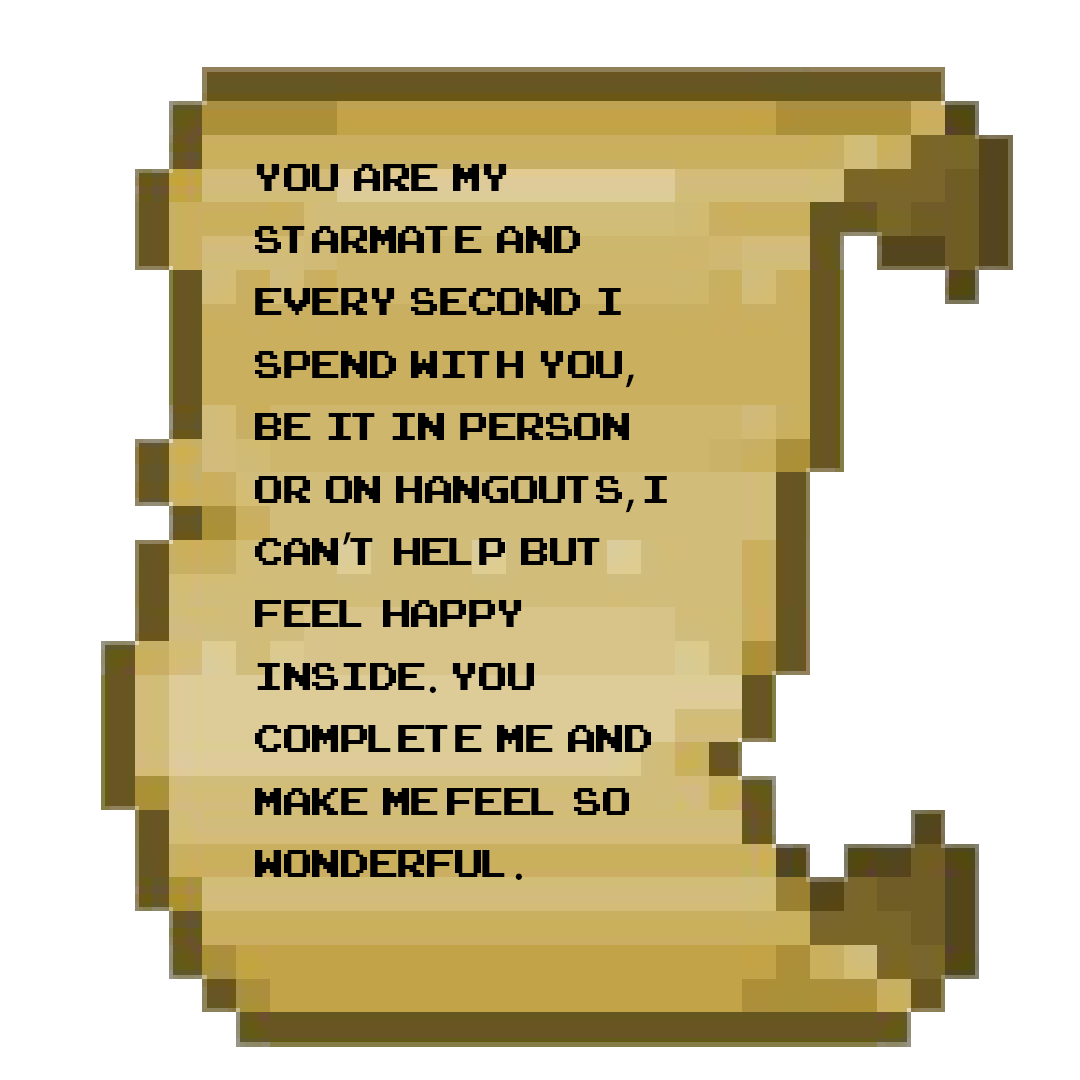
<style>
.page{position:relative;width:1080px;height:1080px;background:#ffffff}
.page>*{position:absolute;margin:0}
.t1{font:52px "ArcadeClassic";color:#000000}
.t2{font:52px "MyriadPro-Regular";color:#000000}
</style>
<div class="page">
<p class="t1" style="left:255px;top:164px;width:412px;height:716px">you  are  my  starmate  and  every  second  i  spend  with  you<span class="t2">,</span> be  it in  person  or  on  hangouts<span class="t2">,</span> i can<span class="t2">’</span>t  help  but  feel  happy  inside<span class="t2">.</span>  you complete  me  and make  me feel  so  wonderful<span class="t2">.</span></p>
</div>
